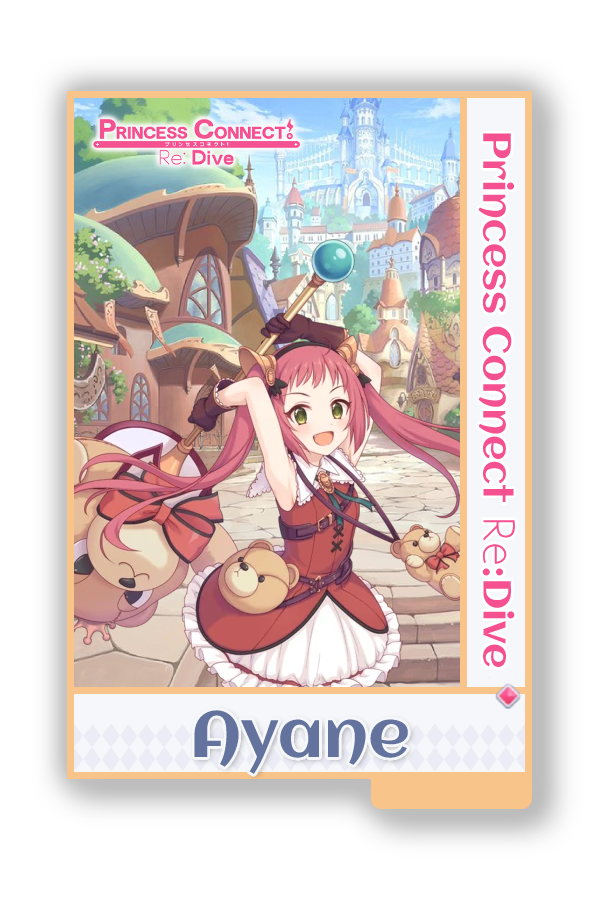
<style>
.page{position:relative;width:600px;height:900px;background:#ffffff}
.page>*{position:absolute;margin:0}
.t1{font:39px "Aclonica-Regular";color:#f55191}
.t2{font:39px "AaarghNormal";color:#f55191}
.t3{font:65px "Aclonica-Regular";color:#64739d}
</style>
<div class="page">
<p class="t1" style="left:478px;top:133px;width:38px;height:534px;rotate:90deg">Princess Connect <span class="t2">Re</span>:Dive</p>
<p class="t3" style="left:194px;top:710px;width:214px;height:64px">Ayane</p>
</div>
